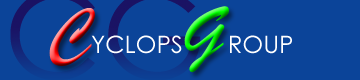
<style>
.page{position:relative;width:360px;height:80px;background:#0b4499}
.page>*{position:absolute;margin:0}
.t1{font:72px "BrushScriptMT"}
.t2{font:24px "CenturyGothic";color:#ffffff}
</style>
<div class="page">
<p class="t1" style="left:184px;top:6px;width:45px;height:67px">G</p>
<p class="t1" style="left:49px;top:8px;width:46px;height:58px">C</p>
<p class="t2" style="left:91px;top:35px;width:91px;height:19px">YCLOPS</p>
<p class="t2" style="left:230px;top:35px;width:62px;height:19px">ROUP</p>
</div>
